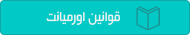
<style>
.page{position:relative;width:190px;height:35px;background:#00c9c6}
.page>*{position:absolute;margin:0}
.t1{font:15px "Mj_BeirutLtX3";color:#f1f2f2}
</style>
<div class="page">
<p class="t1" style="left:46px;top:11px;width:74px;height:14px">قوانین اورمیانت</p>
</div>
